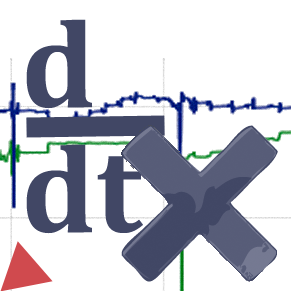
<style>
.page{position:relative;width:291px;height:291px;background:#ffffff}
.page>*{position:absolute;margin:0}
.t1{font:125px/125px "Cambria-Bold";color:#414765}
</style>
<div class="page">
<p class="t1" style="left:26px;top:19px;width:117px;height:215px">d<br>dt</p>
</div>
